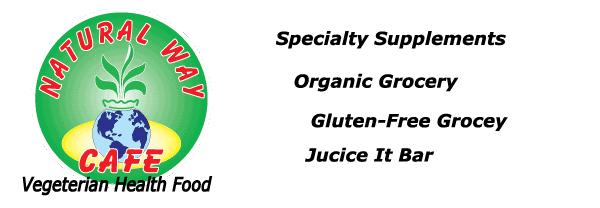
<style>
.page{position:relative;width:600px;height:208px;background:#ffffff}
.page>*{position:absolute;margin:0}
.t1{font:18px "Verdana-BoldItalic";color:#000000}
</style>
<div class="page">
<p class="t1" style="left:275px;top:31px;width:231px;height:18px">Specialty Supplements</p>
<p class="t1" style="left:294px;top:73px;width:165px;height:19px">Organic Grocery</p>
<p class="t1" style="left:311px;top:113px;width:197px;height:18px">Gluten-Free Grocey</p>
<p class="t1" style="left:305px;top:147px;width:129px;height:15px">Jucice It Bar</p>
</div>
